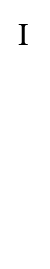
<style>
.page{position:relative;width:50px;height:269px;background:#ffffff}
.page>*{position:absolute;margin:0}
.t1{font:48px "AngsanaNew";color:#000000}
</style>
<div class="page">
<p class="t1" style="left:18px;top:24px;width:10px;height:21px">I</p>
</div>
